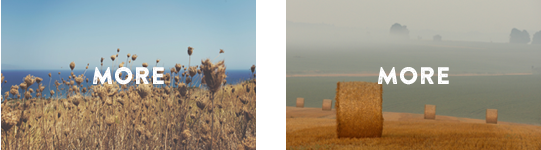
<style>
.page{position:relative;width:541px;height:150px}
.page>*{position:absolute;margin:0}
.t1{font:24px "BrandonPrinted-One";color:#ffffff;text-transform:uppercase}
</style>
<div class="page">
<p class="t1" style="left:93px;top:67px;width:71px;height:18px">more</p>
<p class="t1" style="left:378px;top:67px;width:71px;height:18px">more</p>
</div>
